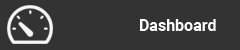
<style>
.page{position:relative;width:240px;height:50px;background:#333333}
.page>*{position:absolute;margin:0}
.t1{font:16px "Roboto-Bold";color:#ffffff}
</style>
<div class="page">
<p class="t1" style="left:140px;top:19px;width:76px;height:12px">Dashboard</p>
</div>
